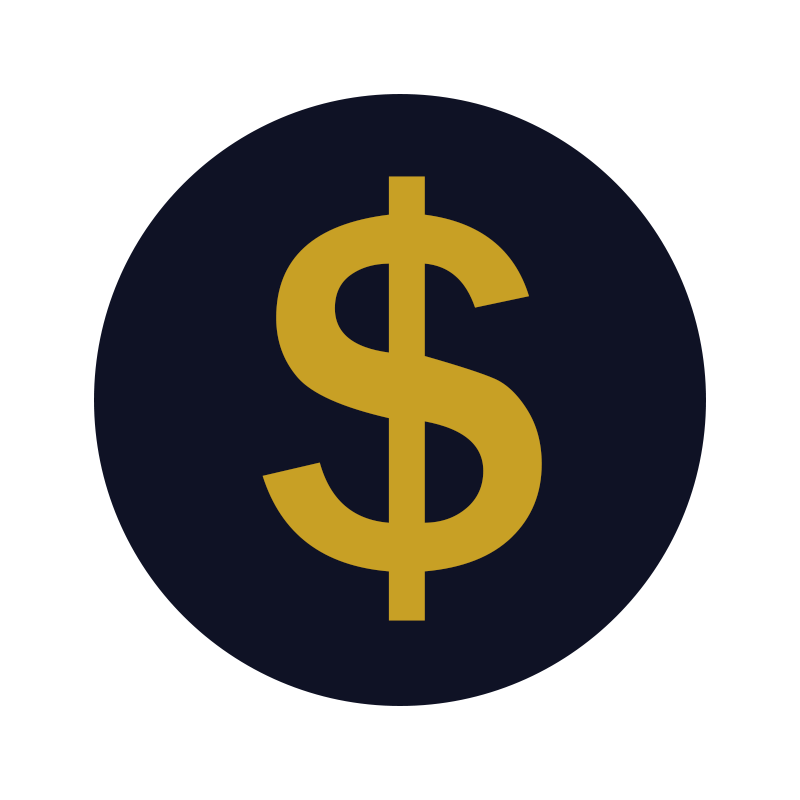
<style>
.page{position:relative;width:800px;height:800px;background:#ffffff}
.page>*{position:absolute;margin:0}
.t1{font:543.4px "FranklinGothic-Medium";color:#c8a025}
</style>
<div class="page">
<p class="t1" style="left:262px;top:176px;width:280px;height:445px">$</p>
</div>
